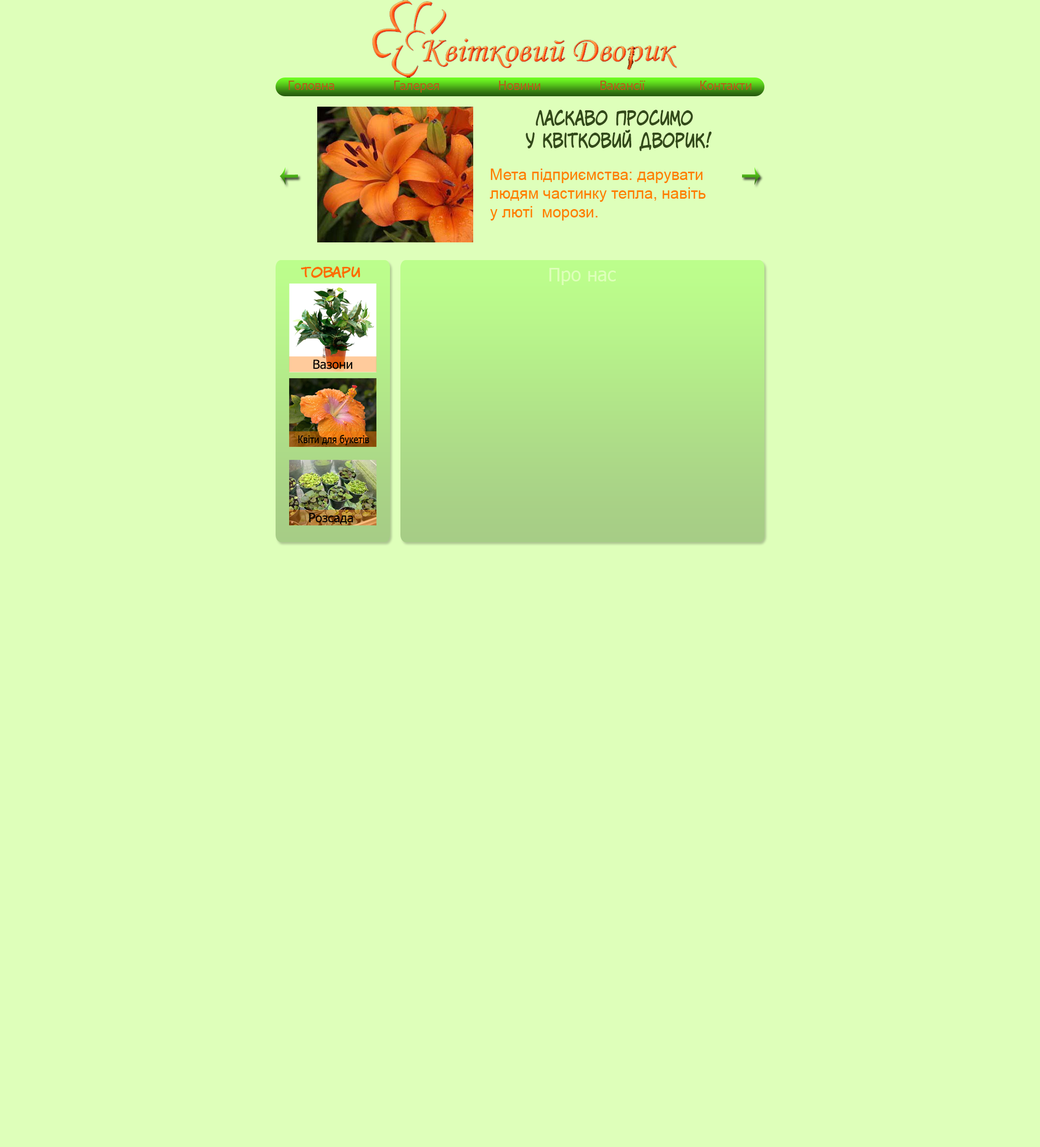
<style>
.page{position:relative;width:1040px;height:1147px;background:#deffba}
.page>*{position:absolute;margin:0}
.t1{font:12.5px "Tahoma";color:#b75c18}
.t2{font:18.7px "v_CCJimLee";color:#32491a;scale:0.83 1}
.t3{font:15.6px "ArialMT";color:#ff7e00}
.t4{font:13px "v_CCJimLee";color:#ff6c00;scale:1.16 1}
.t5{font:18.7px "Tahoma";color:#deffba}
.t6{font:12.5px "Tahoma";color:#000000}
.t7{font:10.6px "Tahoma";color:#000000;scale:0.85 1}
</style>
<div class="page">
<p class="t1" style="left:289px;top:81px;width:462px;height:12px">Головна               Галерея               Новини               Вакансії              Контакти</p>
<p class="t2" style="left:526px;top:110px;width:186px;height:41px;text-align:center">Ласкаво просимо <br>у квітковий дворик!</p>
<p class="t3" style="left:490px;top:168px;width:216px;height:52px">Мета підприємства: дарувати<br>людям частинку тепла, навіть<br>у люті  морози.</p>
<p class="t4" style="left:301px;top:266px;width:59px;height:12px">товари</p>
<p class="t5" style="left:549px;top:268px;width:67px;height:17px">Про нас</p>
<p class="t6" style="left:313px;top:359px;width:40px;height:10px;rotate:1deg">Вазони</p>
<p class="t7" style="left:298px;top:435px;width:71px;height:10px">Квіти для букетів</p>
<p class="t6" style="left:309px;top:513px;width:44px;height:11px">Розсада</p>
</div>
